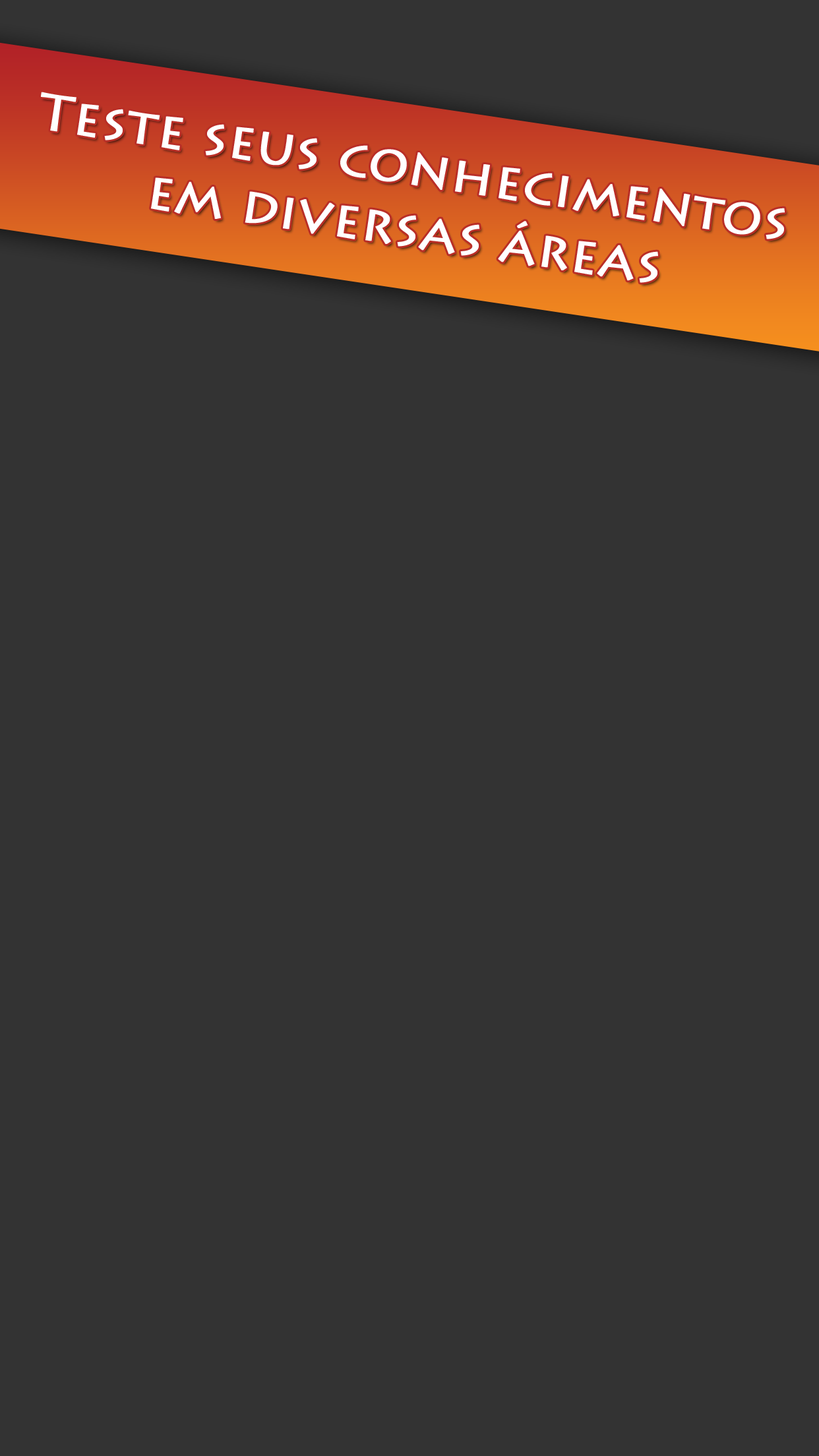
<style>
.page{position:relative;width:819px;height:1456px;background:#333333}
.page>*{position:absolute;margin:0}
.t1{font:51.5px "LithosPro-Regular";color:#ffffff;font-weight:bold}
</style>
<div class="page">
<p class="t1" style="left:41px;top:92px;width:744px;height:191px;text-align:center;rotate:9deg">Teste seus conhecimentos<br>em diversas áreas</p>
</div>
